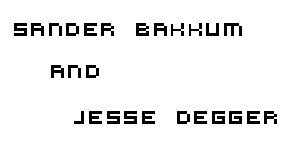
<style>
.page{position:relative;width:300px;height:150px;background:#ffffff}
.page>*{position:absolute;margin:0}
.t1{font:20px "VirtualDJ";color:#000000}
</style>
<div class="page">
<p class="t1" style="left:14px;top:23px;width:228px;height:13px">Sander Bakkum</p>
<p class="t1" style="left:51px;top:65px;width:48px;height:13px">AND</p>
<p class="t1" style="left:74px;top:111px;width:203px;height:13px">Jesse Degger</p>
</div>
